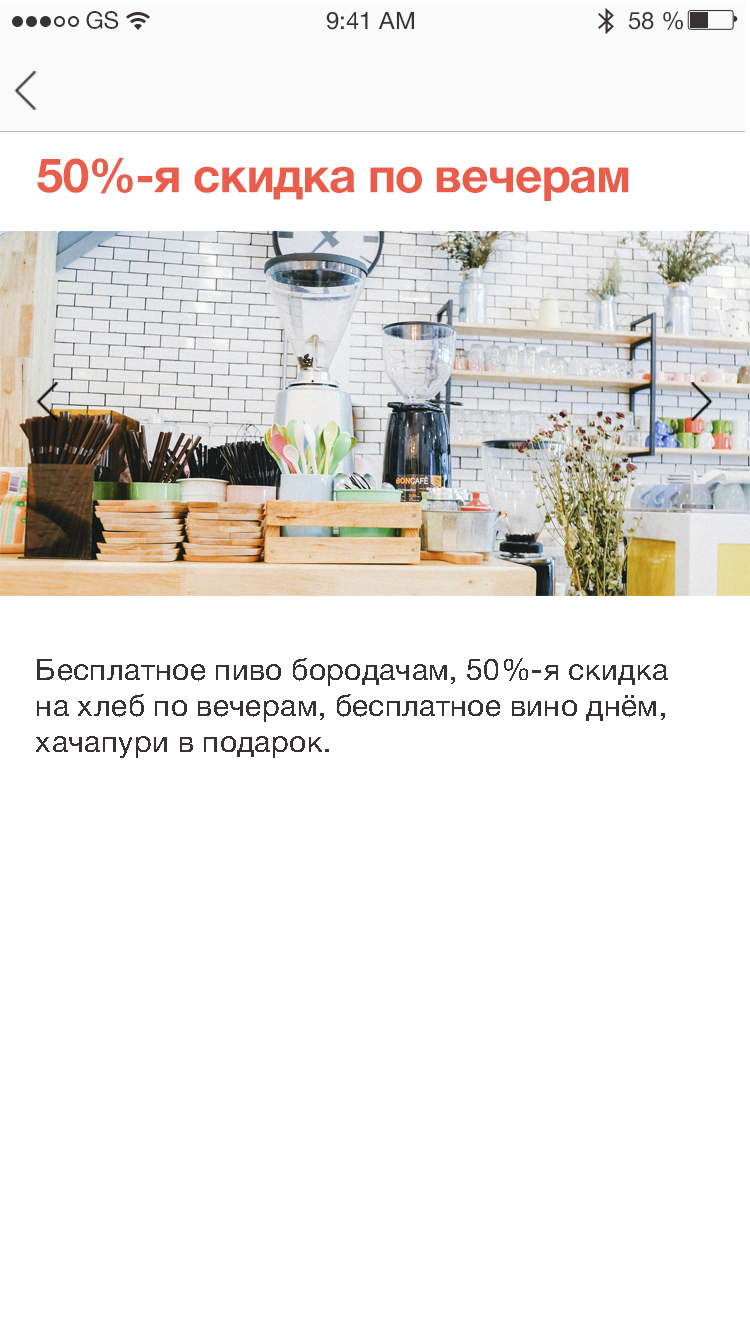
<style>
.page{position:relative;width:750px;height:1335px;background:#ffffff}
.page>*{position:absolute;margin:0}
.t1{font:24px "HelveticaNeueCyr-Roman";color:#383234}
.t2{font:48px "HelveticaNeueCyr-Bold";letter-spacing:-0.024em;color:#ea5d4b}
.t3{font:30px/36px "HelveticaNeueCyr-Roman";letter-spacing:0.012em;color:#383234}
</style>
<div class="page">
<p class="t1" style="left:86px;top:11px;width:33px;height:18px">GS</p>
<p class="t1" style="left:326px;top:11px;width:89px;height:19px">9:41 AM</p>
<p class="t1" style="left:628px;top:11px;width:55px;height:19px">58 %</p>
<p class="t2" style="left:37px;top:157px;width:592px;height:44px">50%-я скидка по вечерам</p>
<p class="t3" style="left:36px;top:658px;width:632px;height:100px">Бесплатное пиво бородачам, 50%-я скидка на хлеб по вечерам, бесплатное вино днём, хачапури в подарок.</p>
</div>
